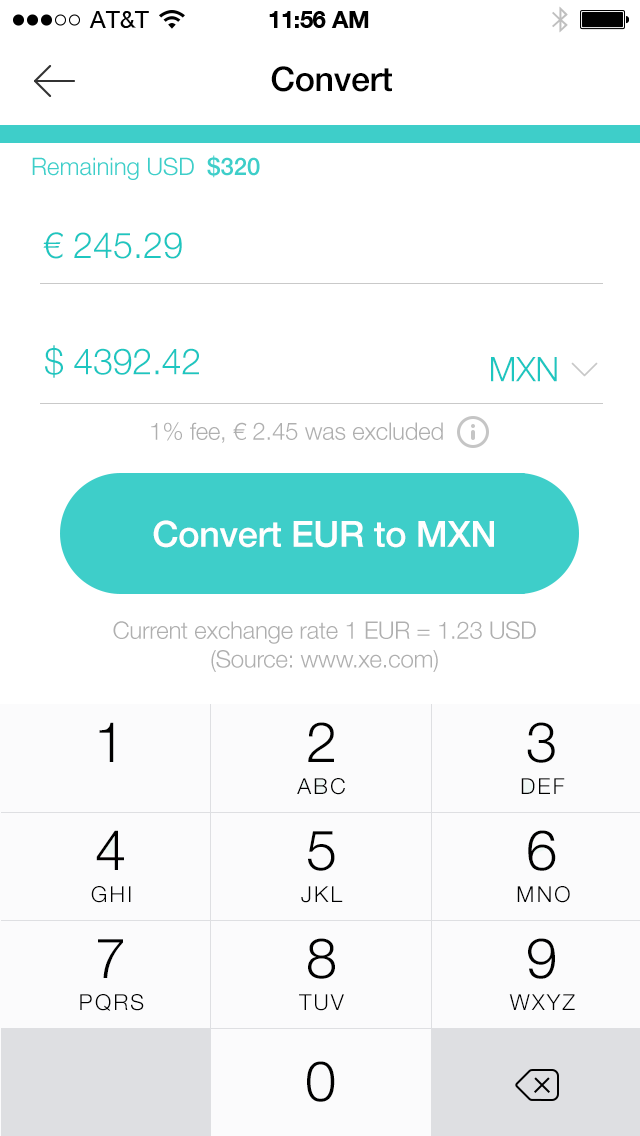
<style>
.page{position:relative;width:640px;height:1136px;background:#ffffff}
.page>*{position:absolute;margin:0}
.t1{font:34px "HelveticaNeue-Medium";letter-spacing:-0.01em;color:#000000}
.t2{font:36px "HelveticaNeue-Light";color:#1ec6c0}
.t3{font:36px "HelveticaNeue-Light";letter-spacing:-0.01em;color:#1ec6c0}
.t4{font:34px "HelveticaNeue-Light";letter-spacing:-0.01em;color:#1ec6c0}
.t5{font:24px "HelveticaNeue-Light";letter-spacing:-0.01em;color:#afafaf}
</style>
<div class="page">
<p class="t1" style="left:271px;top:66px;width:121px;height:26px">Convert</p>
<p class="t2" style="left:43px;top:232px;width:139px;height:27px">€ 245.29</p>
<p class="t3" style="left:45px;top:345px;width:154px;height:33px">$ 4392.42</p>
<p class="t4" style="left:491px;top:357px;width:66px;height:25px">MXN</p>
<p class="t5" style="left:151px;top:422px;width:292px;height:21px">1% fee, € 2.45 was excluded</p>
<p class="t5" style="left:113px;top:621px;width:423px;height:51px;text-align:center">Current exchange rate 1 EUR = 1.23 USD<br>(Source: www.xe.com)</p>
</div>
